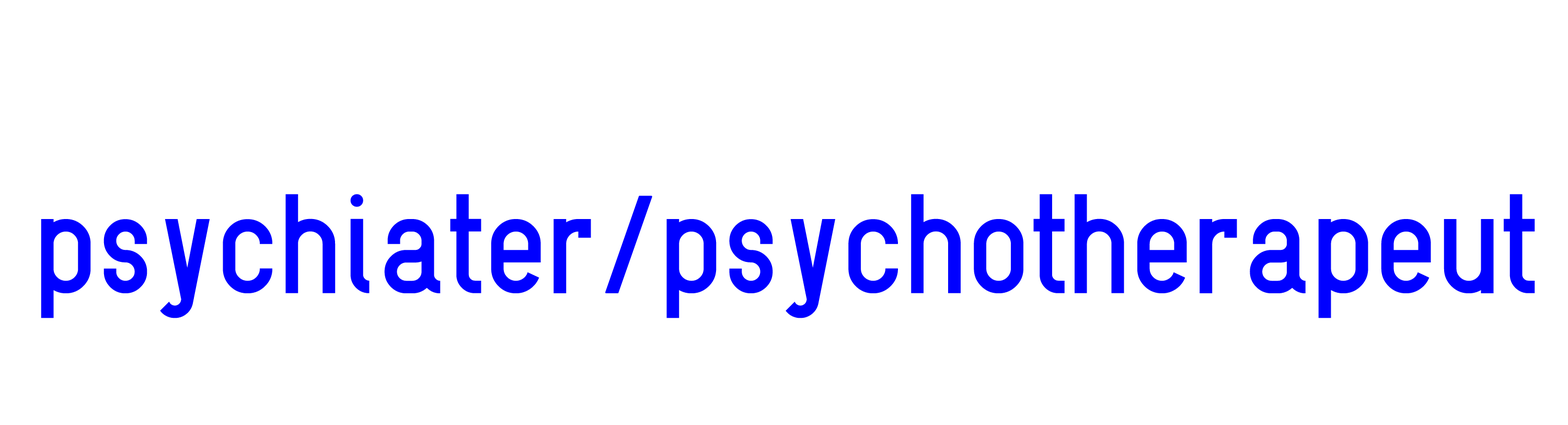
<style>
.page{position:relative;width:1568px;height:425px;background:#ffffff}
.page>*{position:absolute;margin:0}
.t1{font:139.4px "Logisoso";color:#0000ff}
</style>
<div class="page">
<p class="t1" style="left:41px;top:194px;width:1494px;height:124px">psychiater/psychotherapeut</p>
</div>
